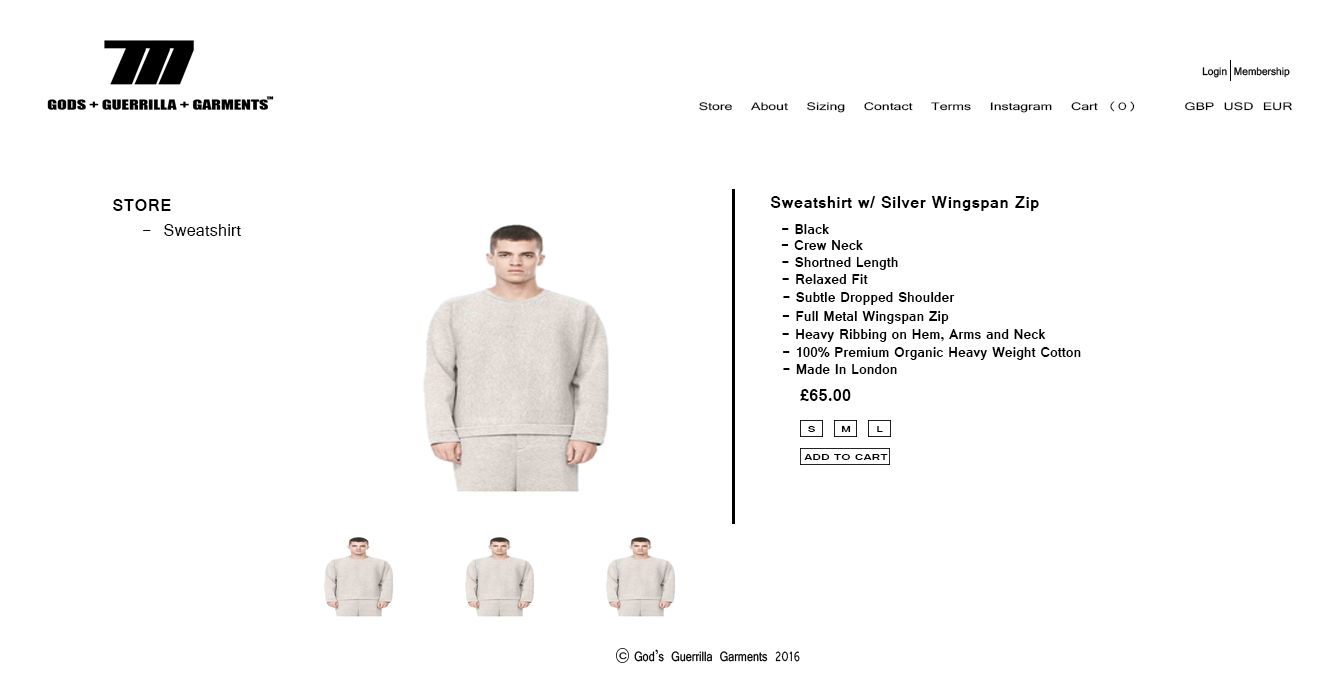
<style>
.page{position:relative;width:1332px;height:683px;background:#ffffff}
.page>*{position:absolute;margin:0}
.t1{font:11.7px "Vrinda";color:#000000;scale:1.35 1}
.t2{font:18.5px "Vrinda-Bold";color:#000000}
.t3{font:18.5px "Vrinda";color:#000000}
.t4{font:14.8px "Vrinda-Bold";color:#000000}
.t5{font:9.9px "Vrinda-Bold";color:#000000;scale:1.31 1}
</style>
<div class="page">
<p class="t1" style="left:699px;top:101px;width:593px;height:12px">Store  About  Sizing  Contact  Terms  Instagram  Cart (0)     GBP USD EUR</p>
<p class="t2" style="left:770px;top:196px;width:269px;height:15px">Sweatshirt w/ Silver Wingspan Zip</p>
<p class="t2" style="left:113px;top:199px;width:58px;height:12px">STORE</p>
<p class="t3" style="left:143px;top:224px;width:98px;height:12px">- Sweatshirt</p>
<p class="t4" style="left:782px;top:224px;width:47px;height:10px"><span class="t2"><br> </span>      - Black</p>
<p class="t4" style="left:781px;top:240px;width:82px;height:10px">- Crew Neck</p>
<p class="t4" style="left:782px;top:257px;width:116px;height:13px"><span class="t2"><br> </span>- Shortned Length</p>
<p class="t4" style="left:782px;top:274px;width:86px;height:10px">- Relaxed Fit</p>
<p class="t4" style="left:783px;top:292px;width:172px;height:13px">- Subtle Dropped Shoulder</p>
<p class="t4" style="left:782px;top:311px;width:167px;height:13px">- Full Metal Wingspan Zip</p>
<p class="t4" style="left:782px;top:329px;width:264px;height:13px">- Heavy Ribbing on Hem, Arms and Neck</p>
<p class="t4" style="left:783px;top:347px;width:298px;height:13px">- 100% Premium Organic Heavy Weight Cotton</p>
<p class="t4" style="left:783px;top:364px;width:114px;height:10px">- Made In London</p>
<p class="t2" style="left:800px;top:389px;width:51px;height:12px">£65.00</p>
<p class="t5" style="left:808px;top:426px;width:7px;height:6px">S</p>
<p class="t5" style="left:841px;top:426px;width:10px;height:6px">M</p>
<p class="t5" style="left:877px;top:426px;width:6px;height:6px">L</p>
<p class="t5" style="left:804px;top:454px;width:84px;height:6px">ADD TO CART</p>
</div>
